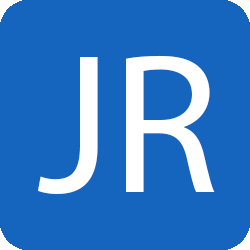
<style>
.page{position:relative;width:250px;height:250px;background:#1565bf}
.page>*{position:absolute;margin:0}
.t1{font:200px "MyriadPro-Regular";color:#ffffff}
</style>
<div class="page">
<p class="t1" style="left:38px;top:55px;width:177px;height:139px">JR</p>
</div>
